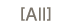
<style>
.page{position:relative;width:72px;height:28px;background:#ffffff}
.page>*{position:absolute;margin:0}
.t1{font:18px "FutoGoB101Pr5-Bold";color:#6e665b}
.t2{font:14.9px "FutoGoB101Pr5-Bold";color:#6e665b;scale:1.2 1}
</style>
<div class="page">
<p class="t1" style="left:21px;top:7px;width:30px;height:14px;opacity:0.9"><span class="t2">[</span>All<span class="t2">]</span></p>
</div>
